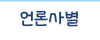
<style>
.page{position:relative;width:100px;height:40px;background:#ffffff}
.page>*{position:absolute;margin:0}
.t1{font:16.7px "THEAlien";color:#214274}
</style>
<div class="page">
<p class="t1" style="left:20px;top:10px;width:58px;height:17px">언론사별</p>
</div>
